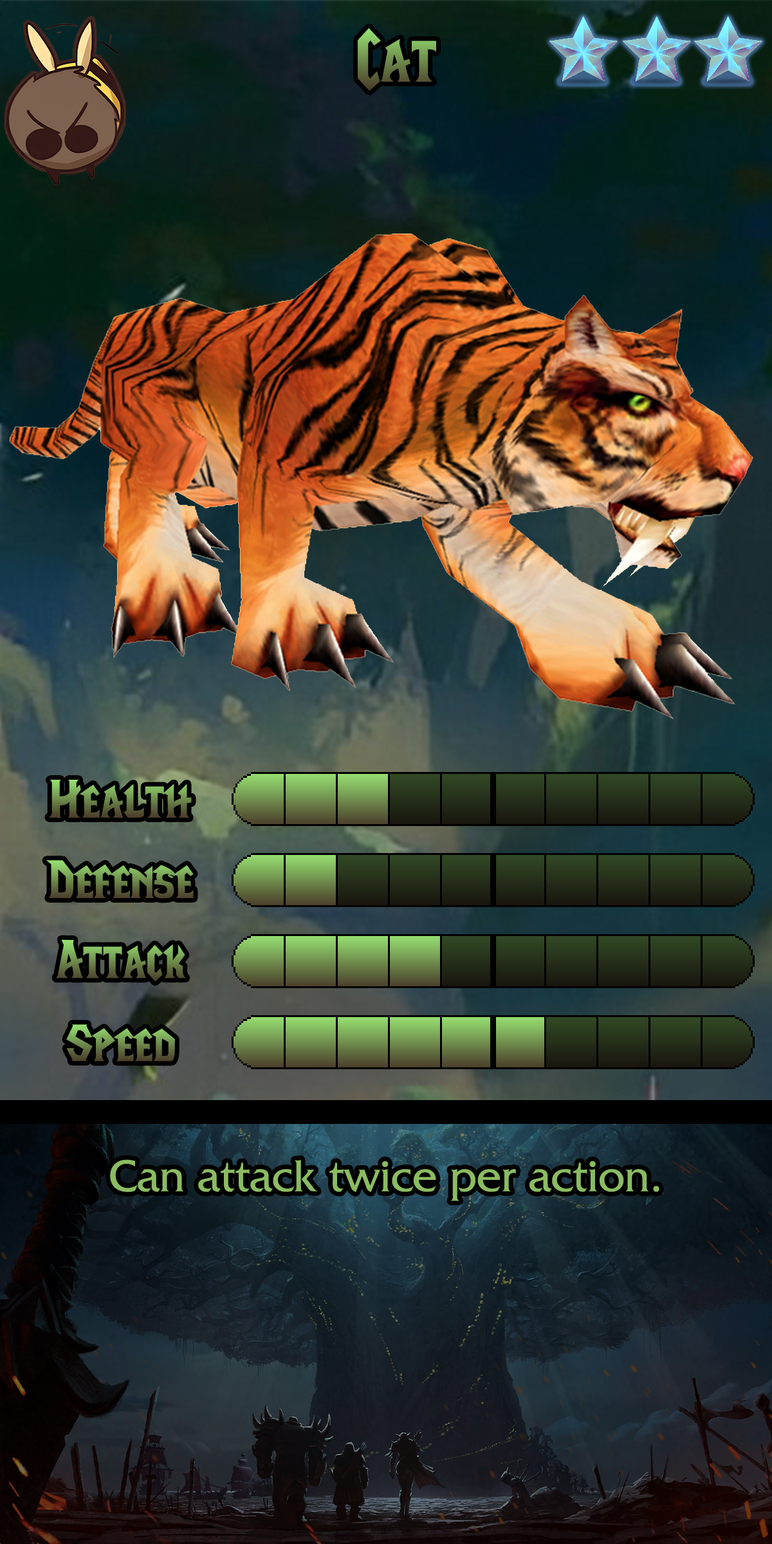
<style>
.page{position:relative;width:772px;height:1544px}
.page>*{position:absolute;margin:0}
.t1{font:121.6px "LifeCraft"}
.t2{font:92.7px "LifeCraft"}
.t3{font:79.8px "FrizQuadrataStd";color:#8bbb62}
</style>
<div class="page">
<p class="t1" style="left:358px;top:28px;width:78px;height:63px">Cat</p>
<p class="t2" style="left:49px;top:780px;width:143px;height:38px">Health</p>
<p class="t2" style="left:46px;top:860px;width:148px;height:39px">Defense</p>
<p class="t2" style="left:56px;top:939px;width:130px;height:43px">Attack</p>
<p class="t2" style="left:66px;top:1024px;width:109px;height:38px">Speed</p>
<p class="t3" style="left:110px;top:1160px;width:550px;height:41px">Can attack twice per action.</p>
</div>
